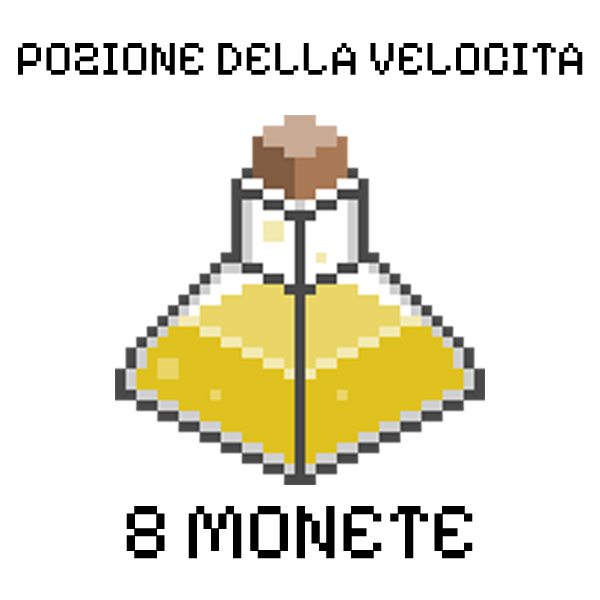
<style>
.page{position:relative;width:600px;height:600px;background:#ffffff}
.page>*{position:absolute;margin:0}
.t1{font:49.6px "PixelifySans-Regular";letter-spacing:-0.01em;color:#000000}
.t2{font:81px "PixelifySans-Regular";letter-spacing:-0.01em;color:#000000}
</style>
<div class="page">
<p class="t1" style="left:18px;top:43px;width:565px;height:32px">POZIONE DELLA VELOCITA</p>
<p class="t2" style="left:126px;top:506px;width:347px;height:53px">8 MONETE</p>
</div>
